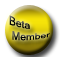
<style>
.page{position:relative;width:60px;height:57px;background:#ffffff}
.page>*{position:absolute;margin:0}
.t1{font:9.3px "MicrosoftSansSerif";color:#000000;scale:1.11 1}
</style>
<div class="page">
<p class="t1" style="left:9px;top:15px;width:41px;height:26px">Beta <br> Member</p>
</div>
